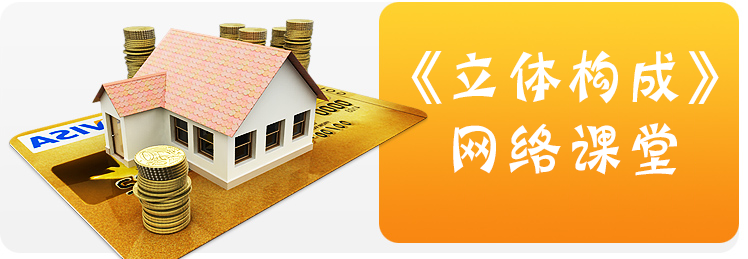
<style>
.page{position:relative;width:748px;height:259px}
.page>*{position:absolute;margin:0}
.t1{font:60px "HYn3gj";color:#ffffff}
</style>
<div class="page">
<p class="t1" style="left:411px;top:50px;width:308px;height:126px">《立体构成》<br>  网络课堂</p>
</div>
